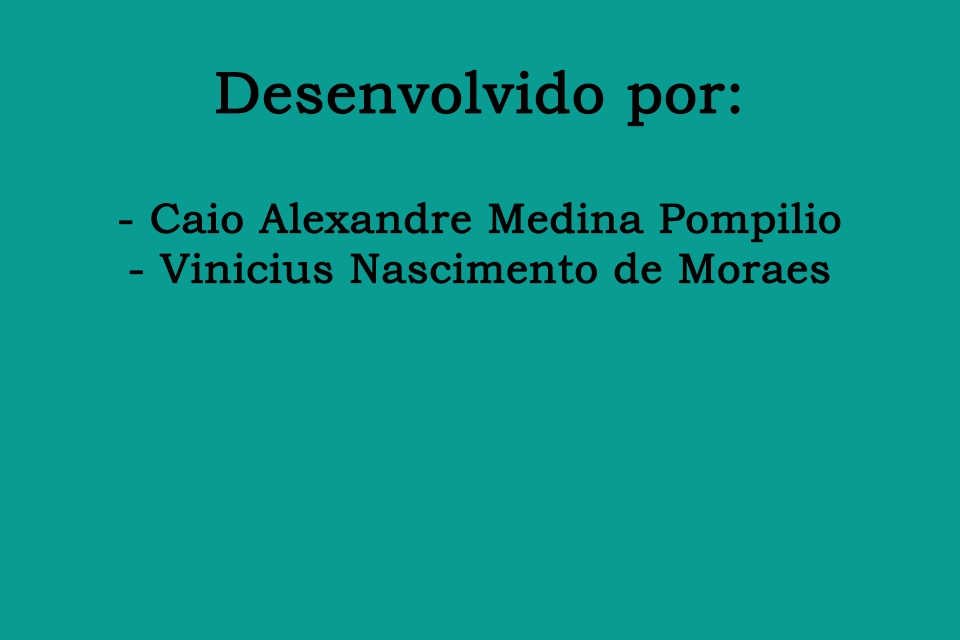
<style>
.page{position:relative;width:960px;height:640px;background:#099c93}
.page>*{position:absolute;margin:0}
.t1{font:41.7px "BookmanOldStyle";color:#000000;font-weight:bold}
.t2{font:58.3px "BookmanOldStyle";color:#000000;font-weight:bold}
</style>
<div class="page">
<p class="t1" style="left:119px;top:69px;width:722px;height:215px;text-align:center"><span class="t2"><br>Desenvolvido por:<br><br></span>- Caio Alexandre Medina Pompilio<br>- Vinicius Nascimento de Moraes</p>
</div>
